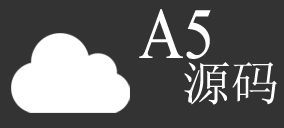
<style>
.page{position:relative;width:284px;height:128px;background:#333333}
.page>*{position:absolute;margin:0}
.t1{font:72px "TimesNewRomanPSMT";color:#ffffff;scale:0.86 1}
.t2{font:48px "SimSun";color:#ffffff}
</style>
<div class="page">
<p class="t1" style="left:139px;top:9px;width:72px;height:50px">A5</p>
<p class="t2" style="left:184px;top:62px;width:93px;height:43px">源码</p>
</div>
